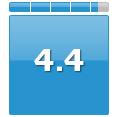
<style>
.page{position:relative;width:117px;height:117px;background:#2793cf}
.page>*{position:absolute;margin:0}
.t1{font:36px "Colaborate-Bold";color:#ffffff;text-transform:uppercase}
</style>
<div class="page">
<p class="t1" style="left:34px;top:49px;width:50px;height:22px">4.4</p>
</div>
